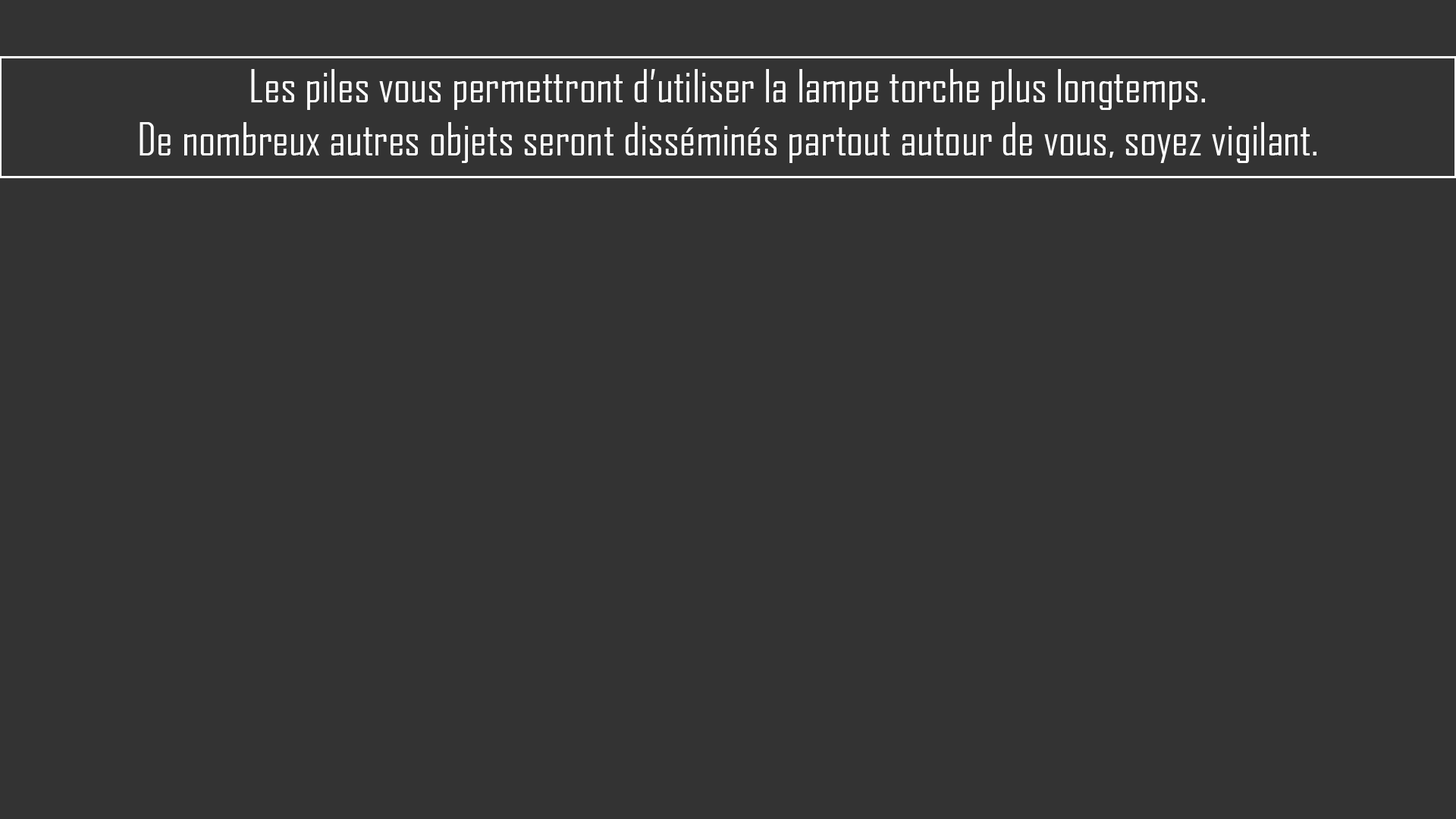
<style>
.page{position:relative;width:1456px;height:819px;background:#333333}
.page>*{position:absolute;margin:0}
.t1{font:44.2px "AgencyFB-Reg";color:#ffffff}
</style>
<div class="page">
<p class="t1" style="left:140px;top:69px;width:1176px;height:94px;text-align:center">Les piles vous permettront d’utiliser la lampe torche plus longtemps.<br>De nombreux autres objets seront disséminés partout autour de vous, soyez vigilant.</p>
</div>
